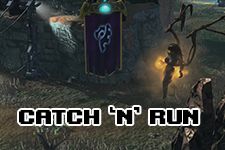
<style>
.page{position:relative;width:225px;height:150px}
.page>*{position:absolute;margin:0}
.t1{font:30px "Upheaval -BRK-";color:#000000}
</style>
<div class="page">
<p class="t1" style="left:19px;top:107px;width:180px;height:17px">Catch ‘n’ Run</p>
</div>
